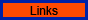
<style>
.page{position:relative;width:88px;height:20px;background:#ff4a00}
.page>*{position:absolute;margin:0}
.t1{font:12px "ArialMT";color:#000000}
</style>
<div class="page">
<p class="t1" style="left:30px;top:6px;width:28px;height:9px">Links</p>
</div>
